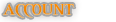
<style>
.page{position:relative;width:116px;height:22px;background:#ffffff}
.page>*{position:absolute;margin:0}
.t1{font:19.1px "VanHelsing-Regular";color:#ff8a00;text-transform:uppercase}
</style>
<div class="page">
<p class="t1" style="left:3px;top:4px;width:72px;height:14px">account</p>
</div>
